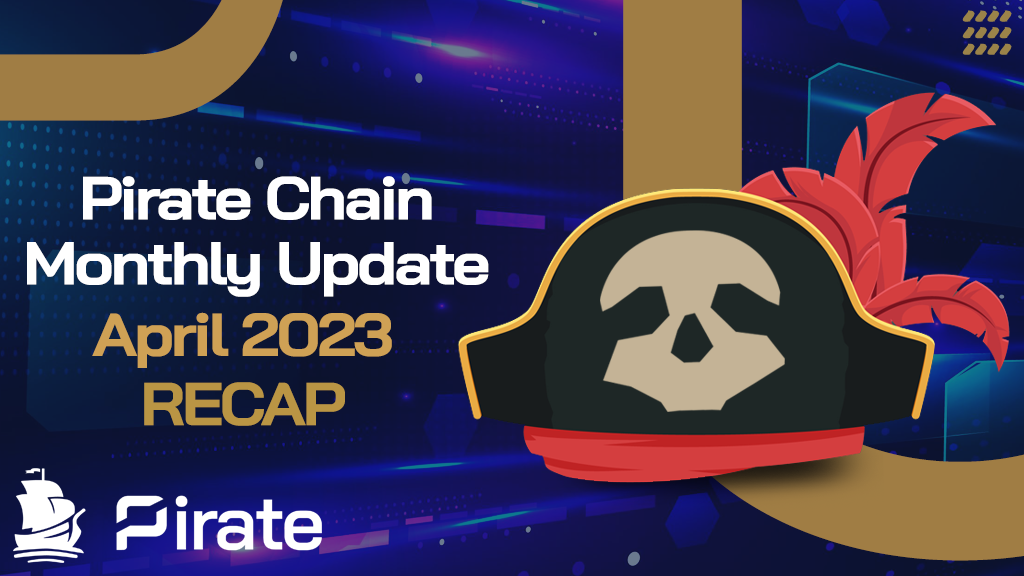
<style>
.page{position:relative;width:1024px;height:576px}
.page>*{position:absolute;margin:0}
.t1{font:98.8px "EchinosParkScript-PERSONALUSEON";color:#9b8349;scale:1.11 1}
.t2{font:60.4px "BaiJamjuree-Bold";letter-spacing:-0.05em;color:#ffffff;scale:1.1 1}
.t3{font:60.4px "BaiJamjuree-Bold";letter-spacing:-0.05em;color:#cfa155;scale:1.1 1}
.t4{font:60.4px "BaiJamjuree-Bold";letter-spacing:-0.05em;color:#ba9544;text-transform:uppercase;scale:1.1 1}
</style>
<div class="page">
<p class="t1" style="left:962px;top:10px;width:50px;height:12px">....</p>
<p class="t1" style="left:962px;top:27px;width:50px;height:12px">....</p>
<p class="t1" style="left:962px;top:43px;width:50px;height:12px">....</p>
<p class="t2" style="left:83px;top:176px;width:349px;height:44px">Pirate Chain</p>
<p class="t2" style="left:27px;top:242px;width:462px;height:55px">Monthly Update</p>
<p class="t3" style="left:92px;top:312px;width:300px;height:56px">April 2023</p>
<p class="t4" style="left:144px;top:382px;width:201px;height:44px">recap</p>
</div>
